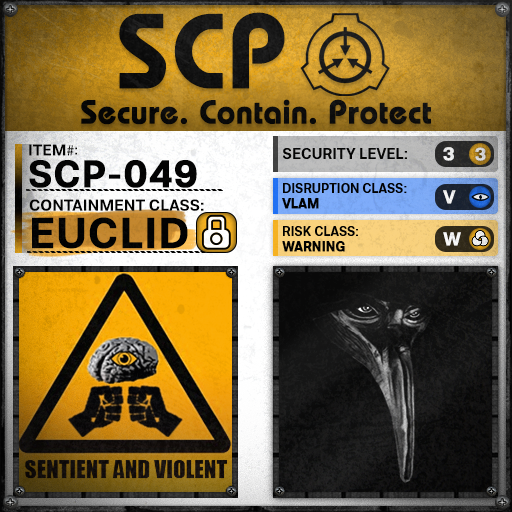
<style>
.page{position:relative;width:512px;height:512px}
.page>*{position:absolute;margin:0}
.t1{font:105.8px "BauhausLT-Demi";color:#000000;font-weight:bold}
.t2{font:33px "BauhausLT-Demi";color:#000000;font-weight:bold}
.t3{font:15.7px "Molde-Semibold";color:#000000}
.t4{font:15.7px "MyriadPro-Regular";color:#000000}
.t5{font:13.7px "Molde-Semibold";color:#000000}
.t6{font:15px "Molde-Semibold";color:#000000}
.t7{font:18.6px "Molde-Semibold";color:#ffffff;font-weight:bold}
.t8{font:17.8px "Molde-Semibold";color:#d6d7d7;font-weight:bold}
.t9{font:38.2px "Molde-Semibold";color:#000000;font-weight:bold}
.t10{font:12.8px "Molde-Semibold";color:#000000}
.t11{font:12.8px "Molde-Semibold";color:#000000;font-weight:bold}
.t12{font:15.9px "Molde-Semibold";color:#000000}
.t13{font:42.8px "Molde-Semibold";color:#000000;font-weight:bold}
</style>
<div class="page">
<p class="t1" style="left:119px;top:12px;width:166px;height:77px">SCP</p>
<p class="t2" style="left:81px;top:99px;width:350px;height:26px">Secure. Contain. Protect</p>
<p class="t3" style="left:29px;top:144px;width:45px;height:12px">ITEM<span class="t4">#</span></p>
<p class="t5" style="left:75px;top:147px;width:2px;height:8px">:</p>
<p class="t6" style="left:283px;top:148px;width:124px;height:11px">SECURITY LEVEL:</p>
<p class="t7" style="left:443px;top:147px;width:11px;height:14px">3</p>
<p class="t8" style="left:475px;top:147px;width:11px;height:14px">3</p>
<p class="t9" style="left:29px;top:160px;width:168px;height:28px">SCP-049</p>
<p class="t10" style="left:282px;top:183px;width:125px;height:26px">DISRUPTION CLASS:<br><span class="t11">VLAM</span></p>
<p class="t7" style="left:443px;top:190px;width:13px;height:14px">V</p>
<p class="t12" style="left:29px;top:199px;width:175px;height:12px">CONTAINMENT CLASS:</p>
<p class="t13" style="left:32px;top:217px;width:156px;height:32px">EUCLID</p>
<p class="t10" style="left:282px;top:226px;width:76px;height:26px">RISK CLASS:<br><span class="t11">WARNING</span></p>
<p class="t7" style="left:443px;top:232px;width:18px;height:14px">W</p>
</div>
